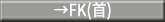
<style>
.page{position:relative;width:165px;height:22px;background:#9b9b99}
.page>*{position:absolute;margin:0}
.t1{font:16.8px "SourceHanSansTW-Regular";color:#ffffff;font-weight:bold;scale:0.86 1}
</style>
<div class="page">
<p class="t1" style="left:54px;top:2px;width:57px;height:18px">→FK(首)</p>
</div>
